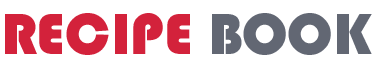
<style>
.page{position:relative;width:375px;height:70px;background:#ffffff}
.page>*{position:absolute;margin:0}
.t1{font:60px "Bauhaus93";color:#d3223b}
.t2{font:60px "Bauhaus93";color:#626773}
</style>
<div class="page">
<p class="t1" style="left:5px;top:13px;width:367px;height:42px">RECIPE <span class="t2">BOOK</span></p>
</div>
